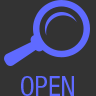
<style>
.page{position:relative;width:96px;height:96px;background:#333333}
.page>*{position:absolute;margin:0}
.t1{font:28px "HelveticaNeueLTStd-Cn";color:#5f6aff;text-transform:uppercase}
</style>
<div class="page">
<p class="t1" style="left:21px;top:76px;width:53px;height:20px">OPEN</p>
</div>
